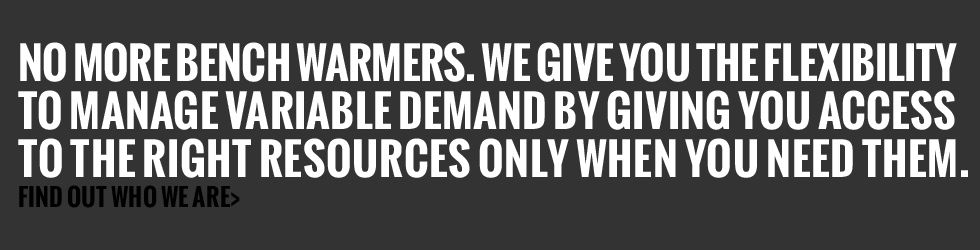
<style>
.page{position:relative;width:980px;height:250px;background:#333333}
.page>*{position:absolute;margin:0}
.t1{font:43px/48px "Oswald-Bold";letter-spacing:-0.01em;color:#ffffff;text-transform:uppercase}
.t2{font:43px/48px "Oswald-Bold";letter-spacing:0.008em;color:#ffffff;text-transform:uppercase}
.t3{font:43px/48px "Oswald-Bold";letter-spacing:0.016em;color:#ffffff;text-transform:uppercase}
.t4{font:24px/30px "Oswald-Bold";letter-spacing:0.01em;color:#000000;text-transform:uppercase}
</style>
<div class="page">
<p class="t1" style="left:18px;top:42px;width:950px;height:166px">No more bench warmers. We give you the flexibility <br><span class="t2">to manage variable demand by giving you access <br></span><span class="t3">to the right resources only when you need them. <br></span><span class="t4">Find out who we are&gt;</span></p>
</div>
